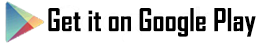
<style>
.page{position:relative;width:261px;height:44px;background:#ffffff}
.page>*{position:absolute;margin:0}
.t1{font:30px "AgencyFB-Bold";color:#000000}
</style>
<div class="page">
<p class="t1" style="left:48px;top:8px;width:208px;height:29px">Get it on Google Play</p>
</div>
